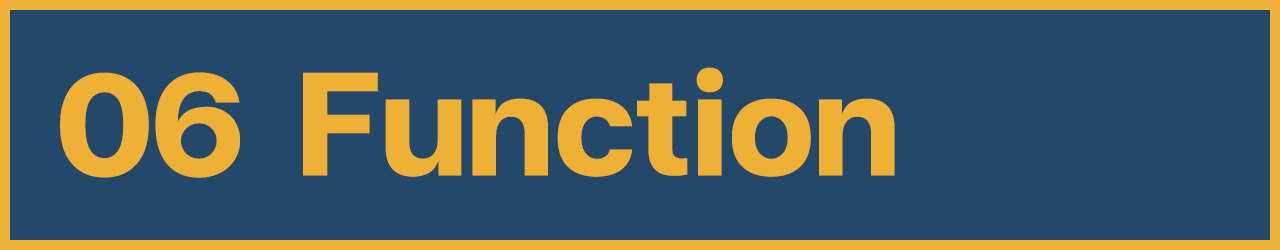
<style>
.page{position:relative;width:1280px;height:250px;background:#23486a}
.page>*{position:absolute;margin:0}
.t1{font:200px "FCMinimalBold";color:#efb036}
</style>
<div class="page">
<p class="t1" style="left:60px;top:72px;width:180px;height:106px">06</p>
<p class="t1" style="left:303px;top:67px;width:592px;height:110px">Function</p>
</div>
